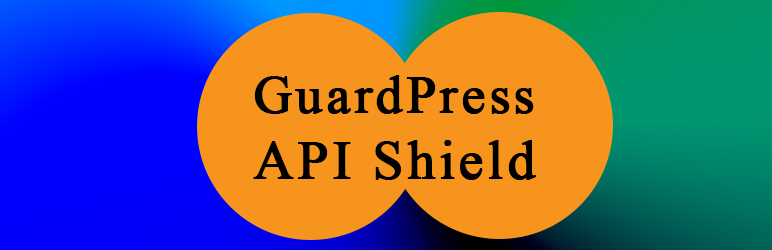
<style>
.page{position:relative;width:772px;height:250px;background:#f7941d}
.page>*{position:absolute;margin:0}
.t1{font:53px "TimesNewRomanPSMT";letter-spacing:0.05em;color:#000000;font-weight:bold}
.t2{font:55px "TimesNewRomanPSMT";letter-spacing:0.05em;color:#000000;font-weight:bold}
</style>
<div class="page">
<p class="t1" style="left:253px;top:75px;width:284px;height:105px">GuardPress<br><span class="t2">API Shield</span></p>
</div>
